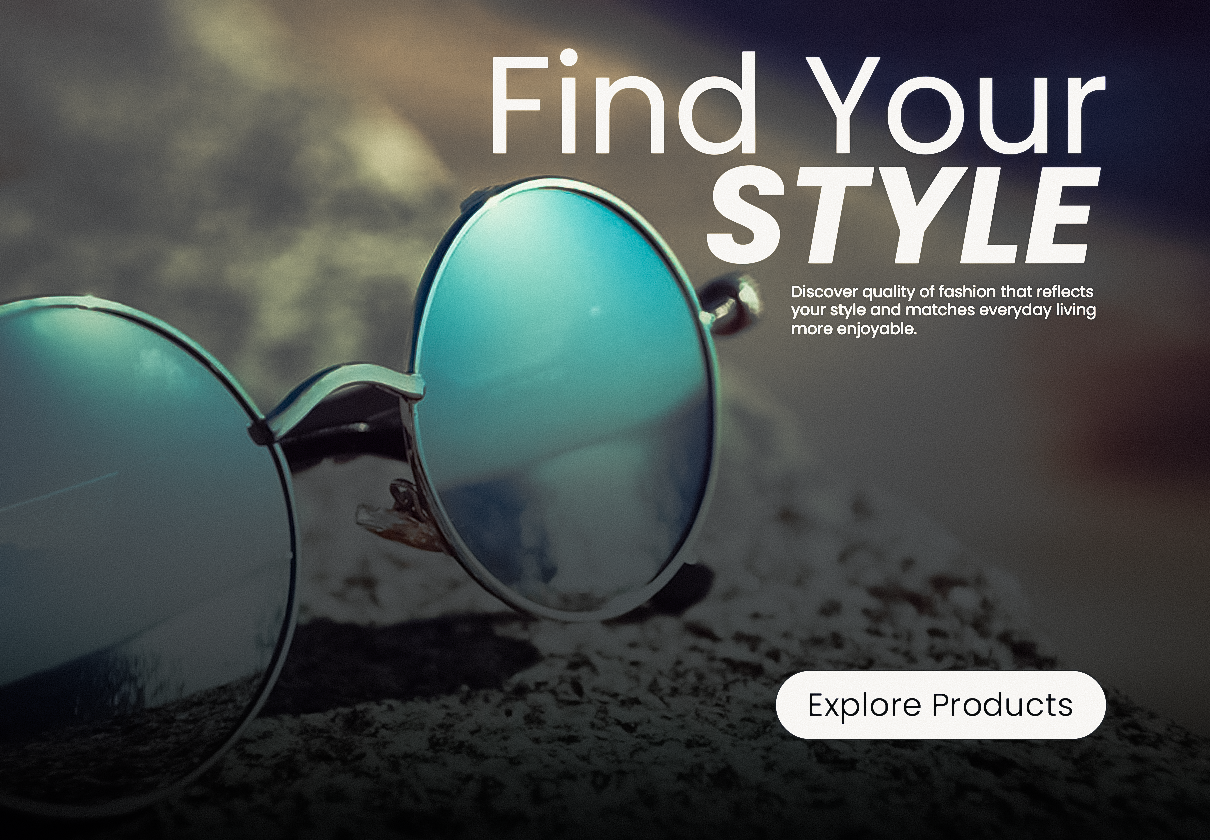
<style>
.page{position:relative;width:1210px;height:840px}
.page>*{position:absolute;margin:0}
.t1{font:137px "Poppins-Regular";color:#ffffff}
.t2{font:135.9px "Poppins-BoldItalic";color:#ffffff}
.t3{font:15.6px "Poppins-Regular";color:#ffffff}
.t4{font:32.5px "Poppins-Regular";color:#040404}
</style>
<div class="page">
<p class="t1" style="left:493px;top:48px;width:613px;height:107px">Find Your</p>
<p class="t2" style="left:707px;top:165px;width:394px;height:99px">STYLE</p>
<p class="t3" style="left:791px;top:285px;width:305px;height:54px">Discover quality of fashion that reflects your style and matches everyday living more enjoyable.</p>
<p class="t4" style="left:809px;top:692px;width:264px;height:33px">Explore Products</p>
</div>
